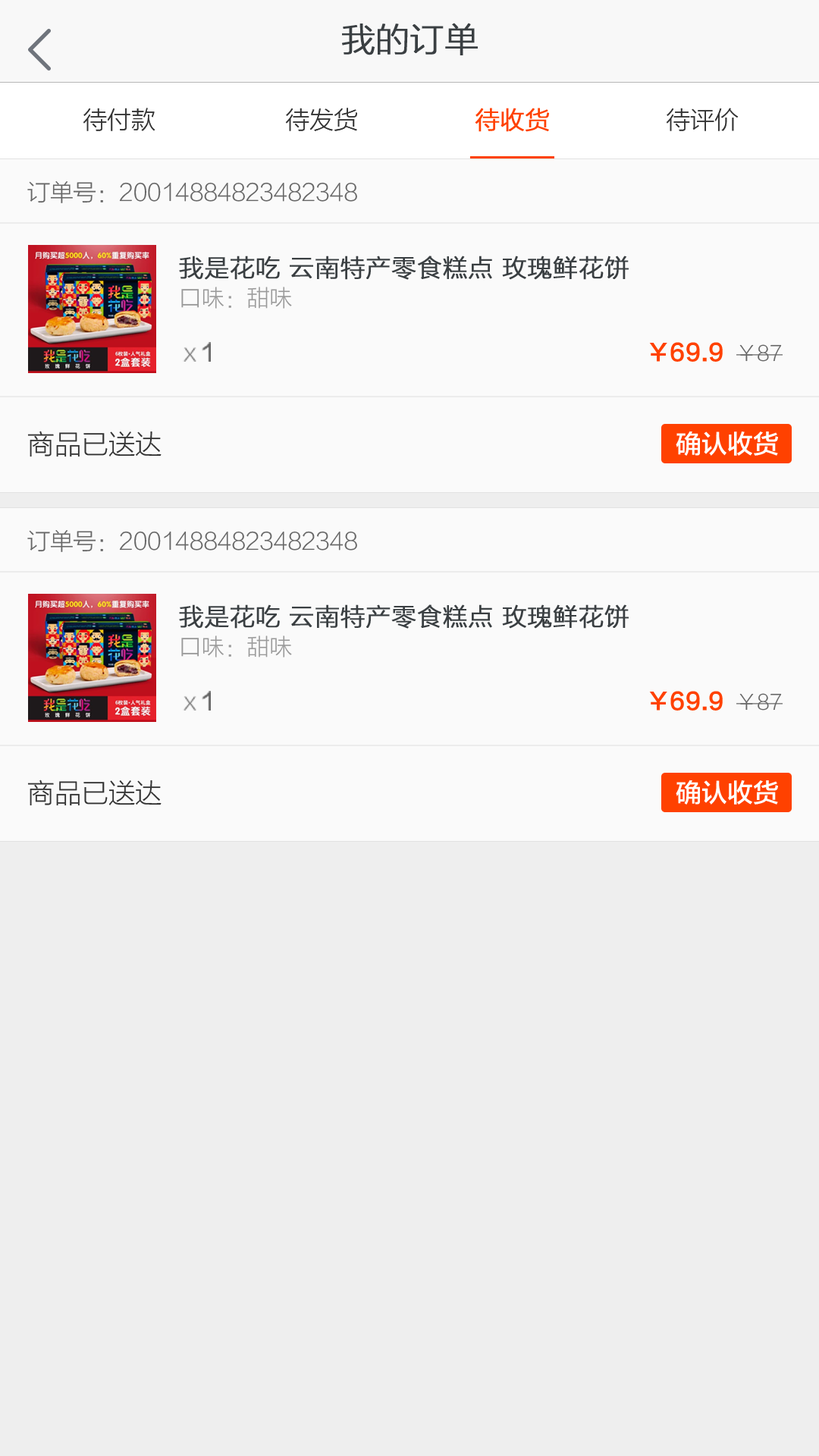
<style>
.page{position:relative;width:819px;height:1456px;background:#eeeeee}
.page>*{position:absolute;margin:0}
.t1{font:33.4px "FZLTXHK--GBK1-0";color:#3a3f42;font-weight:bold}
.t2{font:24.3px "FZLTXHK--GBK1-0";color:#333333}
.t3{font:24.3px "FZLTXHK--GBK1-0";color:#ff4100;font-weight:bold}
.t4{font:23px "FZLTXHK--GBK1-0";color:#666666}
.t5{font:24.3px/30.7px "FZLTXHK--GBK1-0";color:#3a3f42;font-weight:bold}
.t6{font:22.7px/30.7px "FZLTXHK--GBK1-0";color:#999999}
.t7{font:23px "FZLTZHK--GBK1-0";color:#666666}
.t8{font:23px "FZLTZHK--GBK1-0";color:#ff4100}
.t9{font:20.5px "FZLTXHK--GBK1-0";color:#666666}
.t10{font:26.9px "FZLTXHK--GBK1-0";color:#333333}
.t11{font:25.8px "FZLTZHK--GBK1-0";color:#ffffff}
</style>
<div class="page">
<p class="t1" style="left:342px;top:23px;width:136px;height:32px">我的订单</p>
<p class="t2" style="left:83px;top:108px;width:656px;height:24px">待付款                   待发货                 <span class="t3">待收货</span>                 待评价</p>
<p class="t4" style="left:27px;top:181px;width:330px;height:22px">订单号：20014884823482348</p>
<p class="t5" style="left:179px;top:256px;width:450px;height:53px">我是花吃 云南特产零食糕点 玫瑰鲜花饼<br><span class="t6">口味：甜味</span></p>
<p class="t4" style="left:183px;top:342px;width:28px;height:20px">x <span class="t7">1</span></p>
<p class="t8" style="left:649px;top:342px;width:134px;height:20px">￥69.9  <span class="t9">￥87</span></p>
<p class="t10" style="left:27px;top:431px;width:135px;height:26px">商品已送达</p>
<p class="t11" style="left:676px;top:431px;width:102px;height:25px">确认收货</p>
<p class="t4" style="left:27px;top:530px;width:330px;height:22px">订单号：20014884823482348</p>
<p class="t5" style="left:179px;top:604px;width:450px;height:53px">我是花吃 云南特产零食糕点 玫瑰鲜花饼<br><span class="t6">口味：甜味</span></p>
<p class="t4" style="left:183px;top:691px;width:28px;height:20px">x <span class="t7">1</span></p>
<p class="t8" style="left:649px;top:691px;width:134px;height:20px">￥69.9  <span class="t9">￥87</span></p>
<p class="t10" style="left:27px;top:780px;width:135px;height:26px">商品已送达</p>
<p class="t11" style="left:676px;top:780px;width:102px;height:25px">确认收货</p>
</div>
